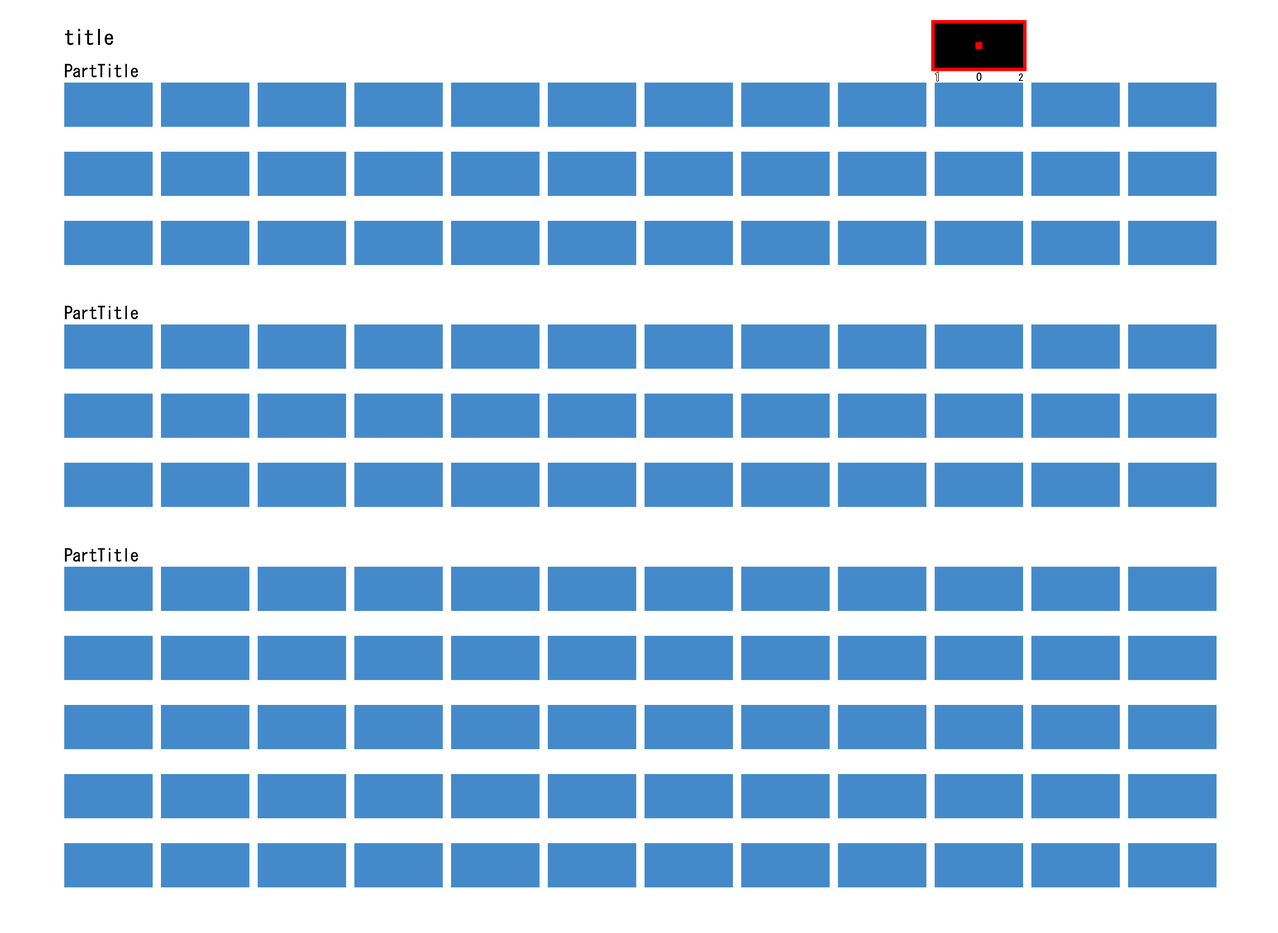
<style>
.page{position:relative;width:1278px;height:933px;background:#ffffff}
.page>*{position:absolute;margin:0}
.t1{font:20.7px "MS-Gothic";letter-spacing:-0.05em;color:#000000;font-weight:bold}
.t2{font:17.3px "MS-Gothic";letter-spacing:-0.05em;color:#000000;font-weight:bold}
.t3{font:11.1px "MS-Gothic";letter-spacing:-0.05em;color:#ffffff;font-weight:bold}
.t4{font:11.1px "MS-Gothic";letter-spacing:-0.05em;color:#000000;font-weight:bold}
.t5{font:9.7px "MS-Gothic";letter-spacing:-0.05em;color:#000000;font-weight:bold}
</style>
<div class="page">
<p class="t1" style="left:65px;top:29px;width:48px;height:16px">title</p>
<p class="t2" style="left:65px;top:64px;width:73px;height:13px">PartTitle</p>
<p class="t3" style="left:936px;top:72px;width:2px;height:9px">1</p>
<p class="t4" style="left:977px;top:72px;width:5px;height:9px">0</p>
<p class="t5" style="left:1019px;top:73px;width:4px;height:8px">2</p>
<p class="t2" style="left:65px;top:305px;width:73px;height:14px">PartTitle</p>
<p class="t2" style="left:65px;top:548px;width:73px;height:14px">PartTitle</p>
</div>
